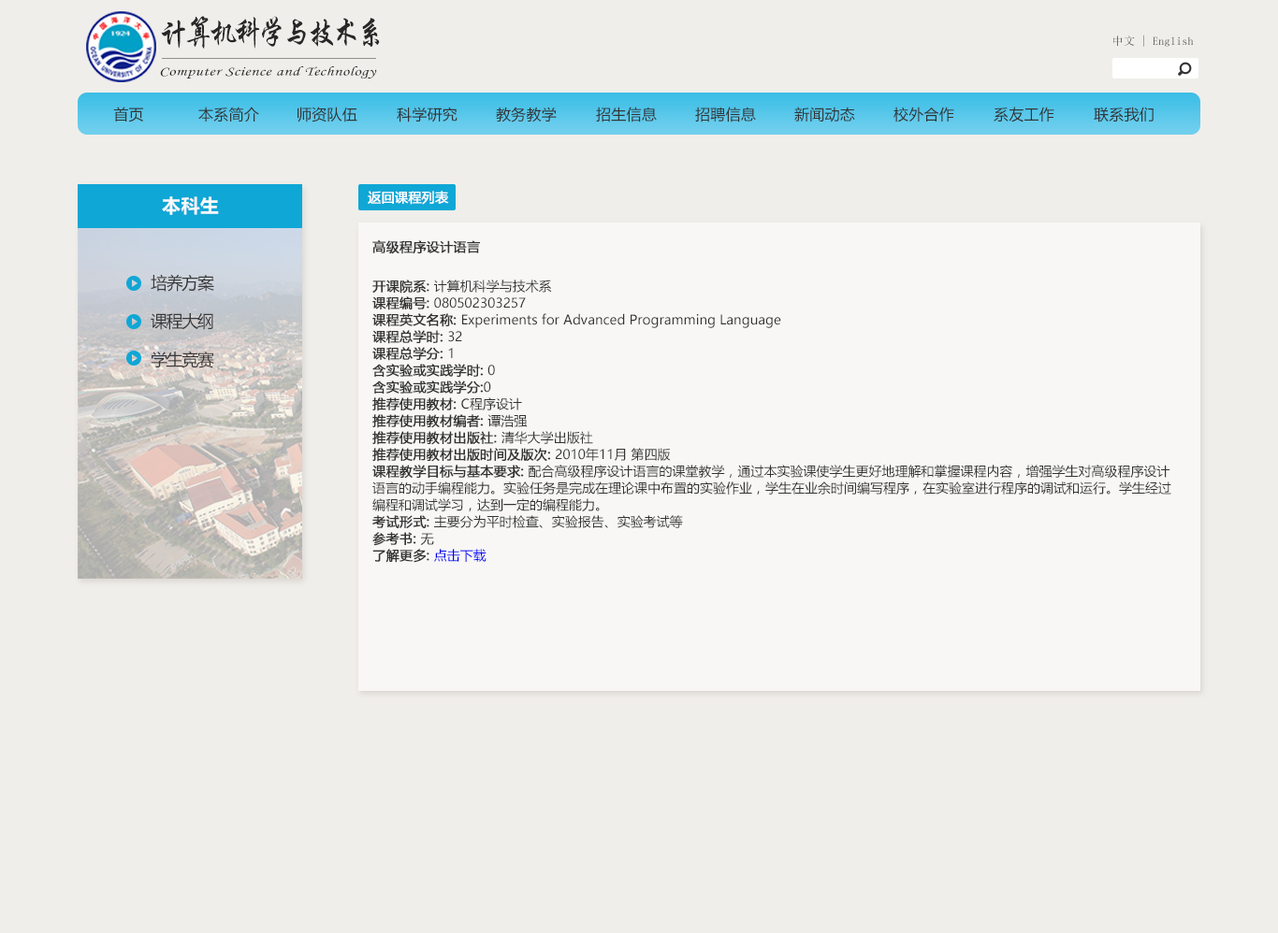
<style>
.page{position:relative;width:1278px;height:933px;background:#f0eeea}
.page>*{position:absolute;margin:0}
.t1{font:32.6px "STXingkai";letter-spacing:-0.14em;color:#272727;scale:0.88 1}
.t2{font:11.2px "SimSun";letter-spacing:0.02em}
.t3{font:12.9px "STLiti";letter-spacing:0.02em;color:#272727;scale:1.34 1}
.t4{font:15px "MicrosoftYaHei";letter-spacing:0.02em;color:#333333}
.t5{font:18.7px "MicrosoftYaHei-Bold";letter-spacing:0.02em;color:#f9f9f9}
.t6{font:13.1px "MicrosoftYaHei";color:#ffffff;font-weight:bold}
.t7{font:13.1px "MicrosoftYaHei";color:#333333;font-weight:bold}
.t8{font:16.8px "MicrosoftYaHei";letter-spacing:-0.076em;color:#383838}
.t9{font:13.1px/16.8px "MicrosoftYaHei";color:#333333}
.t10{font:13.1px/16.8px "MicrosoftYaHei";color:#333333;font-weight:bold}
.t11{font:13.1px/16.8px "MicrosoftYaHei";color:#0000f0}
</style>
<div class="page">
<p class="t1" style="left:161px;top:16px;width:219px;height:33px">计算机科学与技术系</p>
<p class="t2" style="left:1113px;top:35px;width:80px;height:12px">中文 | English</p>
<p class="t3" style="left:160px;top:66px;width:217px;height:13px">Computer Science and Technology</p>
<p class="t4" style="left:113px;top:107px;width:30px;height:16px">首页</p>
<p class="t4" style="left:198px;top:107px;width:61px;height:16px">本系简介</p>
<p class="t4" style="left:297px;top:107px;width:60px;height:16px">师资队伍</p>
<p class="t4" style="left:397px;top:107px;width:60px;height:16px">科学研究</p>
<p class="t4" style="left:496px;top:107px;width:60px;height:16px">教务教学</p>
<p class="t4" style="left:596px;top:107px;width:61px;height:16px">招生信息</p>
<p class="t4" style="left:695px;top:107px;width:61px;height:16px">招聘信息</p>
<p class="t4" style="left:794px;top:107px;width:61px;height:16px">新闻动态</p>
<p class="t4" style="left:893px;top:107px;width:61px;height:16px">校外合作</p>
<p class="t4" style="left:993px;top:107px;width:61px;height:16px">系友工作</p>
<p class="t4" style="left:1093px;top:107px;width:60px;height:16px">联系我们</p>
<p class="t5" style="left:162px;top:196px;width:57px;height:19px">本科生</p>
<p class="t6" style="left:368px;top:191px;width:81px;height:14px">返回课程列表</p>
<p class="t7" style="left:372px;top:240px;width:108px;height:14px">高级程序设计语言</p>
<p class="t8" style="left:151px;top:274px;width:63px;height:18px">培养方案</p>
<p class="t9" style="left:372px;top:280px;width:799px;height:283px"><span class="t10">开课院系: </span>计算机科学与技术系<br><span class="t10">课程编号: </span>080502303257<br><span class="t10">课程英文名称: </span>Experiments for Advanced Programming Language<br><span class="t10">课程总学时: </span>32<br><span class="t10">课程总学分: </span>1<br><span class="t10">含实验或实践学时: </span>0<br><span class="t10">含实验或实践学分:</span>0<br><span class="t10">推荐使用教材: </span>C程序设计<br><span class="t10">推荐使用教材编者: </span>谭浩强<br><span class="t10">推荐使用教材出版社: </span>清华大学出版社<br><span class="t10">推荐使用教材出版时间及版次: </span>2010年11月 第四版<br><span class="t10">课程教学目标与基本要求: </span>配合高级程序设计语言的课堂教学，通过本实验课使学生更好地理解和掌握课程内容，增强学生对高级程序设计语言的动手编程能力。实验任务是完成在理论课中布置的实验作业，学生在业余时间编写程序，在实验室进行程序的调试和运行。学生经过编程和调试学习，达到一定的编程能力。<br><span class="t10">考试形式: </span>主要分为平时检查、实验报告、实验考试等<br><span class="t10">参考书: </span>无<br><span class="t10">了解更多: </span><span class="t11">点击下载</span></p>
<p class="t8" style="left:151px;top:313px;width:62px;height:17px">课程大纲</p>
<p class="t8" style="left:151px;top:351px;width:63px;height:17px">学生竞赛</p>
</div>
